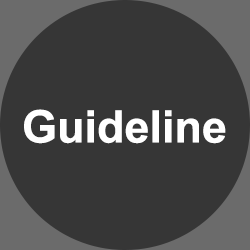
<style>
.page{position:relative;width:250px;height:250px;background:#363636}
.page>*{position:absolute;margin:0}
.t1{font:45px "Arial-BoldMT";color:#ffffff}
</style>
<div class="page">
<p class="t1" style="left:24px;top:109px;width:202px;height:35px">Guideline</p>
</div>
